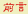
<style>
.page{position:relative;width:28px;height:14px;background:#f0f0c0}
.page>*{position:absolute;margin:0}
.t1{font:12px "IDLiLight"}
</style>
<div class="page">
<p class="t1" style="left:3px;top:2px;width:24px;height:10px">前言</p>
</div>
